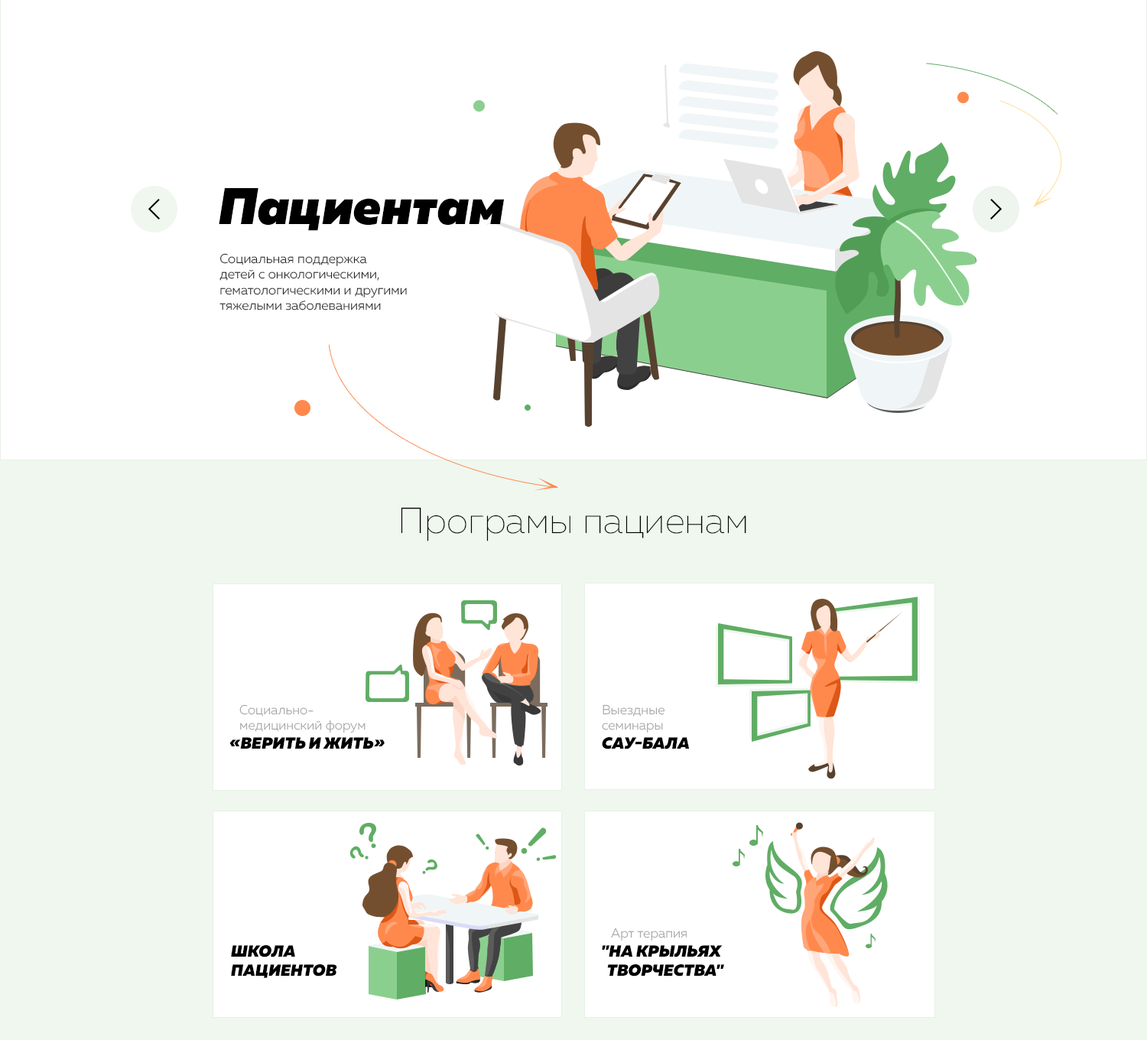
<style>
.page{position:relative;width:1147px;height:1040px;background:#ffffff}
.page>*{position:absolute;margin:0}
.t1{font:51.2px "MullerBlackItalic";color:#000000}
.t2{font:13px "MullerLight";color:#282828}
.t3{font:35.9px "MullerThin";color:#000000}
.t4{font:13px "MullerLight";color:#a6a6a6}
.t5{font:16.1px "MullerBlackItalic";color:#000000;text-transform:uppercase}
</style>
<div class="page">
<p class="t1" style="left:219px;top:188px;width:285px;height:43px">Пациентам</p>
<p class="t2" style="left:219px;top:253px;width:188px;height:57px">Социальная поддержка <br>детей с онкологическими, <br>гематологическими и другими <br>тяжелыми заболеваниями</p>
<p class="t3" style="left:401px;top:507px;width:345px;height:34px">Програмы пациенам</p>
<p class="t4" style="left:229px;top:704px;width:156px;height:44px">Социально-<br>   медицинский форум <br><span class="t5">«Верить и жить»</span></p>
<p class="t4" style="left:602px;top:704px;width:88px;height:45px">Выездные <br>семинары<br><span class="t5">Сау-Бала</span></p>
<p class="t5" style="left:602px;top:927px;width:122px;height:49px"><span class="t4">   Арт терапия<br></span>"На крыльях<br>  творчества"</p>
<p class="t5" style="left:231px;top:945px;width:106px;height:33px">Школа<br>пациентов</p>
</div>
